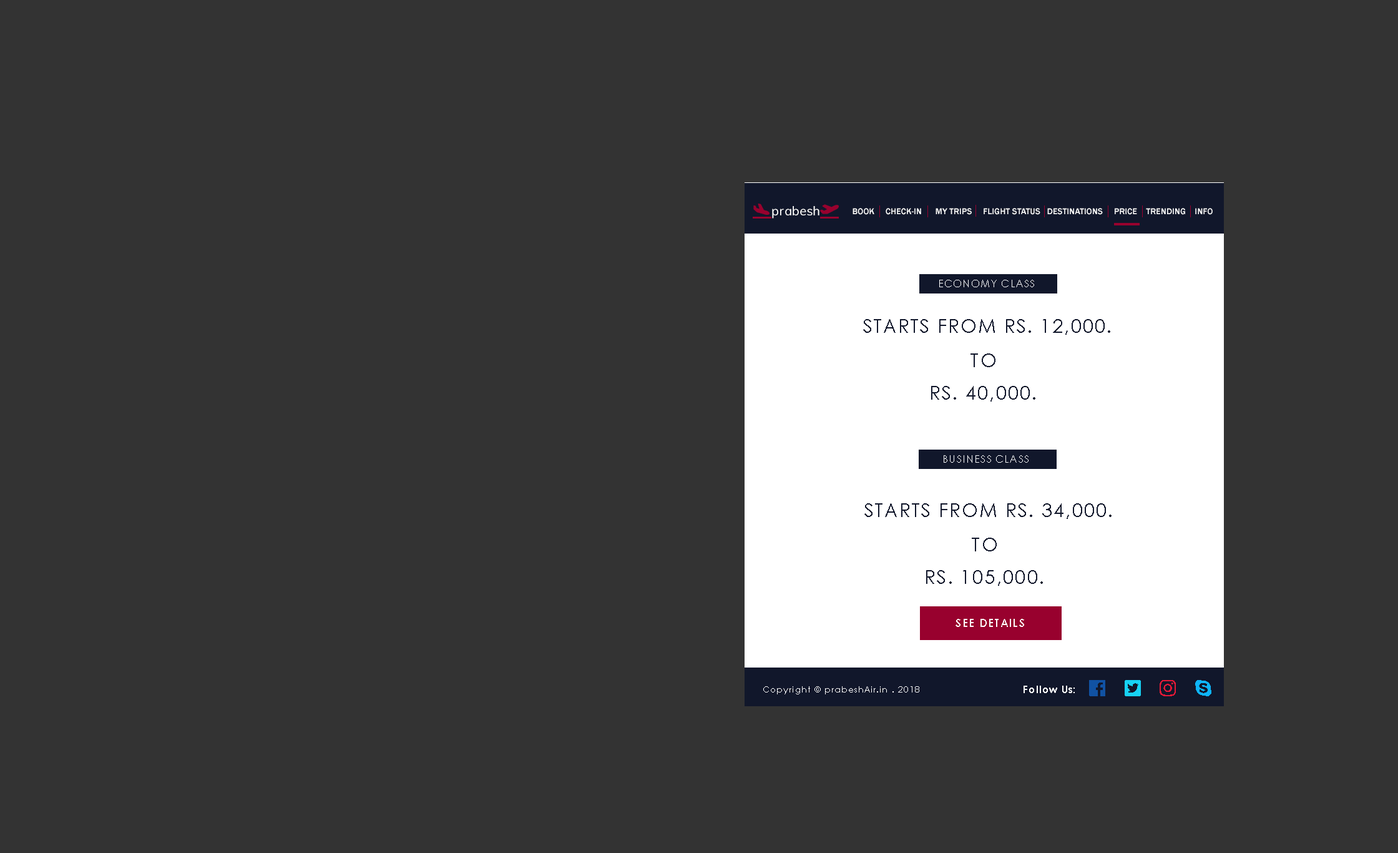
<style>
.page{position:relative;width:1398px;height:853px;background:#333333}
.page>*{position:absolute;margin:0}
.t1{font:8.7px "FranklinGothic-Medium";letter-spacing:0.005em;color:#ffffff}
.t2{font:10px "CenturyGothic";letter-spacing:0.075em;color:#ffffff}
.t3{font:18.7px "CenturyGothic";letter-spacing:0.075em;color:#11172b}
.t4{font:11.2px "CenturyGothic-Bold";letter-spacing:0.075em;color:#ffffff}
.t5{font:8.7px "CenturyGothic";letter-spacing:0.075em;color:#ffffff}
.t6{font:10px "CenturyGothic-Bold";letter-spacing:0.075em;color:#ffffff}
</style>
<div class="page">
<p class="t1" style="left:853px;top:208px;width:360px;height:7px">BOOK     CHECK-IN      MY TRIPS     FLIGHT STATUS   DESTINATIONS     PRICE    TRENDING    INFO</p>
<p class="t2" style="left:940px;top:280px;width:94px;height:7px">ECONOMY CLASS</p>
<p class="t3" style="left:863px;top:319px;width:248px;height:16px">STARTS FROM RS. 12,000.</p>
<p class="t3" style="left:971px;top:353px;width:25px;height:14px">TO</p>
<p class="t3" style="left:931px;top:386px;width:105px;height:15px">RS. 40,000.</p>
<p class="t2" style="left:944px;top:455px;width:85px;height:8px">BUSINESS CLASS</p>
<p class="t3" style="left:865px;top:503px;width:247px;height:16px">STARTS FROM RS. 34,000.</p>
<p class="t3" style="left:972px;top:537px;width:25px;height:14px">TO</p>
<p class="t3" style="left:926px;top:570px;width:117px;height:16px">RS. 105,000.</p>
<p class="t4" style="left:956px;top:619px;width:68px;height:8px">SEE DETAILS</p>
<p class="t5" style="left:763px;top:686px;width:157px;height:8px">Copyright © prabeshAir.in . 2018</p>
<p class="t6" style="left:1024px;top:685px;width:51px;height:8px">Follow Us:</p>
</div>
